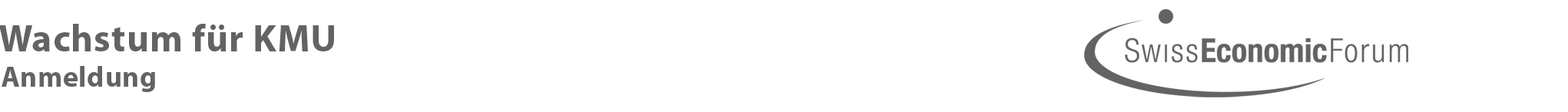
<style>
.page{position:relative;width:1568px;height:112px;background:#ffffff}
.page>*{position:absolute;margin:0}
.t1{font:38.4px "MyriadPro-Bold";letter-spacing:0.02em;color:#646363}
.t2{font:28.8px "MyriadPro-Bold";letter-spacing:0.02em;color:#646363}
</style>
<div class="page">
<p class="t1" style="left:0px;top:24px;width:334px;height:27px">Wachstum für KMU</p>
<p class="t2" style="left:2px;top:66px;width:153px;height:26px">Anmeldung</p>
</div>
